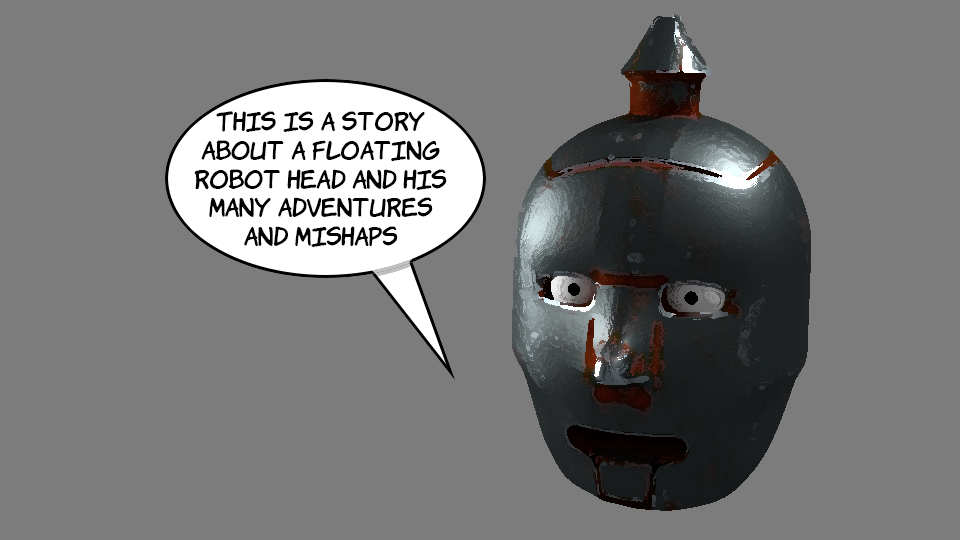
<style>
.page{position:relative;width:960px;height:540px;background:#7c7c7c}
.page>*{position:absolute;margin:0}
.t1{font:24px "KomikaHand";color:#000000}
</style>
<div class="page">
<p class="t1" style="left:194px;top:111px;width:253px;height:136px;text-align:center">This is a story<br>about a floating<br>robot head and his<br>many adventures<br>and mishaps</p>
</div>
